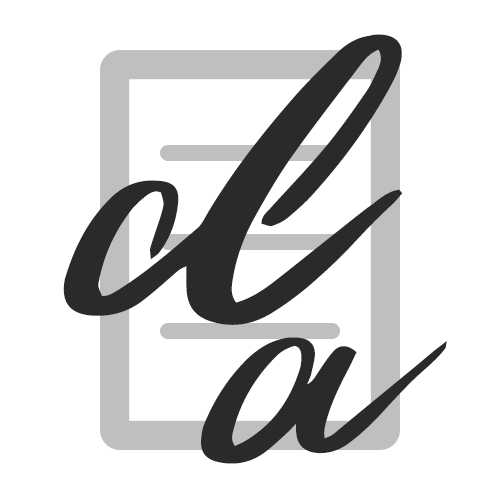
<style>
.page{position:relative;width:500px;height:500px;background:#ffffff}
.page>*{position:absolute;margin:0}
.t1{font:375px "WildYouth-Regular";color:#2a2a2a}
.t2{font:300px "WildYouth-Regular";color:#2a2a2a}
</style>
<div class="page">
<p class="t1" style="left:63px;top:34px;width:340px;height:291px">d</p>
<p class="t2" style="left:201px;top:337px;width:246px;height:127px">a</p>
</div>
